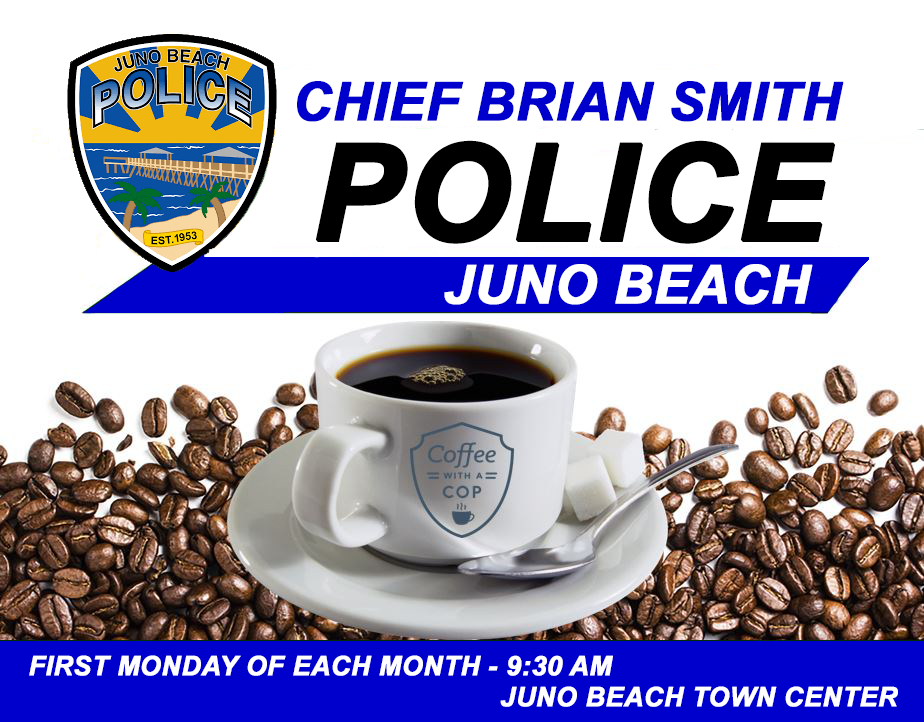
<style>
.page{position:relative;width:924px;height:722px;background:#ffffff}
.page>*{position:absolute;margin:0}
.t1{font:53.3px "Arial-BoldItalicMT";color:#0000cc;font-weight:bold}
.t2{font:26.7px "Arial-BoldItalicMT";color:#ffffff;font-weight:bold}
</style>
<div class="page">
<p class="t1" style="left:297px;top:81px;width:547px;height:41px">CHIEF BRIAN SMITH</p>
<p class="t2" style="left:29px;top:655px;width:584px;height:21px">FIRST MONDAY OF EACH MONTH - 9:30 AM</p>
<p class="t2" style="left:500px;top:686px;width:398px;height:21px">JUNO BEACH TOWN CENTER</p>
</div>
